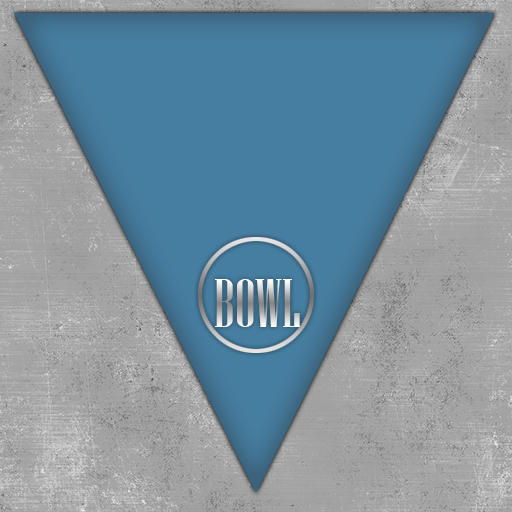
<style>
.page{position:relative;width:512px;height:512px;background:#467ea1}
.page>*{position:absolute;margin:0}
.t1{font:67.9px "NiagaraSolid-Reg"}
</style>
<div class="page">
<p class="t1" style="left:215px;top:279px;width:85px;height:48px">BOWL</p>
</div>
